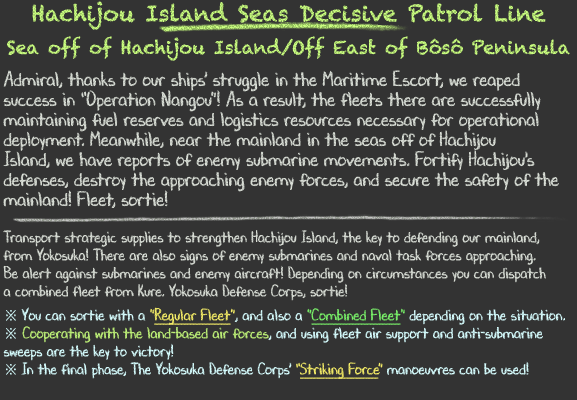
<style>
.page{position:relative;width:577px;height:400px;background:#333333}
.page>*{position:absolute;margin:0}
.t1{font:18px/36px "Chalkduster"}
.t2{font:22px/36px "Chalkduster"}
.t3{font:20px/20px "DJBChalkItUp";color:#d9ded6;scale:0.9 1}
.t4{font:16px/18px "DJBChalkItUp";color:#d9ded6;scale:0.9 1}
.t5{font:16px/24px "DJBChalkItUp";color:#d9ded6;scale:0.9 1}
.t6{font:16px/18px "TimesNewRomanPSMT";color:#d7feff;scale:0.9 1}
.t7{font:16px/18px "DJBChalkItUp";color:#d7feff;scale:0.9 1}
.t8{font:16px/18px "DJBChalkItUp";color:#f5ed68;scale:0.9 1}
.t9{font:16px/18px "DJBChalkItUp";color:#f5ed68;text-decoration:underline;scale:0.9 1}
.t10{font:16px/18px "DJBChalkItUp";color:#7bf26b;scale:0.9 1}
.t11{font:16px/18px "DJBChalkItUp";color:#7bf26b;text-decoration:underline;scale:0.9 1}
.t12{font:16px/18px "DJBChalkItUp";color:#bdef78;scale:0.9 1}
</style>
<div class="page">
<p class="t1" style="left:7px;top:1px;width:563px;height:60px;text-align:center"><span class="t2">Hachijou Island Seas Decisive Patrol Line<br></span>Sea off of Hachijou Island/Off East of Bôsô Peninsula</p>
<p class="t3" style="left:3px;top:70px;width:562px;height:309px">Admiral, thanks to our ships’ struggle in the Maritime Escort, we reaped<br>success in “Operation Nangou”! As a result, the fleets there are successfully<br>maintaining fuel reserves and logistics resources necessary for operational<br>deployment. Meanwhile, near the mainland in the seas off of Hachijou<br>Island, we have reports of enemy submarine movements. Fortify Hachijou's<br>defenses, destroy the approaching enemy forces, and secure the safety of the<br>mainland! Fleet, sortie!<br><br><span class="t4">Transport strategic supplies to strengthen Hachijou Island, the key to defending our mainland,<br>from Yokosuka! There are also signs of enemy submarines and naval task forces approaching.<br>Be alert against submarines and enemy aircraft! Depending on circumstances you can dispatch<br></span><span class="t5">a combined fleet from Kure. Yokosuka Defense Corps, sortie!<br></span><span class="t6">※ </span><span class="t7">You can sortie with a </span><span class="t8">"</span><span class="t9">Regular Fleet</span><span class="t8">"</span><span class="t7">, and also a </span><span class="t10">"</span><span class="t11">Combined Fleet</span><span class="t10">" </span><span class="t7">depending on the situation.<br></span><span class="t6">※ </span><span class="t12">Cooperating with the land-based air forces</span><span class="t7">, and using fleet air support and anti-submarine<br>sweeps are the key to victory!<br></span><span class="t6">※ </span><span class="t7">In the final phase, The Yokosuka Defense Corps’ </span><span class="t8">“</span><span class="t9">Striking Force</span><span class="t8">”</span><span class="t7"> manoeuvres can be used!</span></p>
</div>
